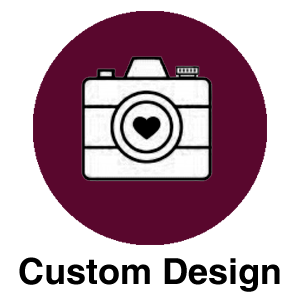
<style>
.page{position:relative;width:300px;height:300px;background:#ffffff}
.page>*{position:absolute;margin:0}
.t1{font:36px "Helvetica-Bold";color:#000000}
</style>
<div class="page">
<p class="t1" style="left:19px;top:257px;width:261px;height:35px">Custom Design</p>
</div>
